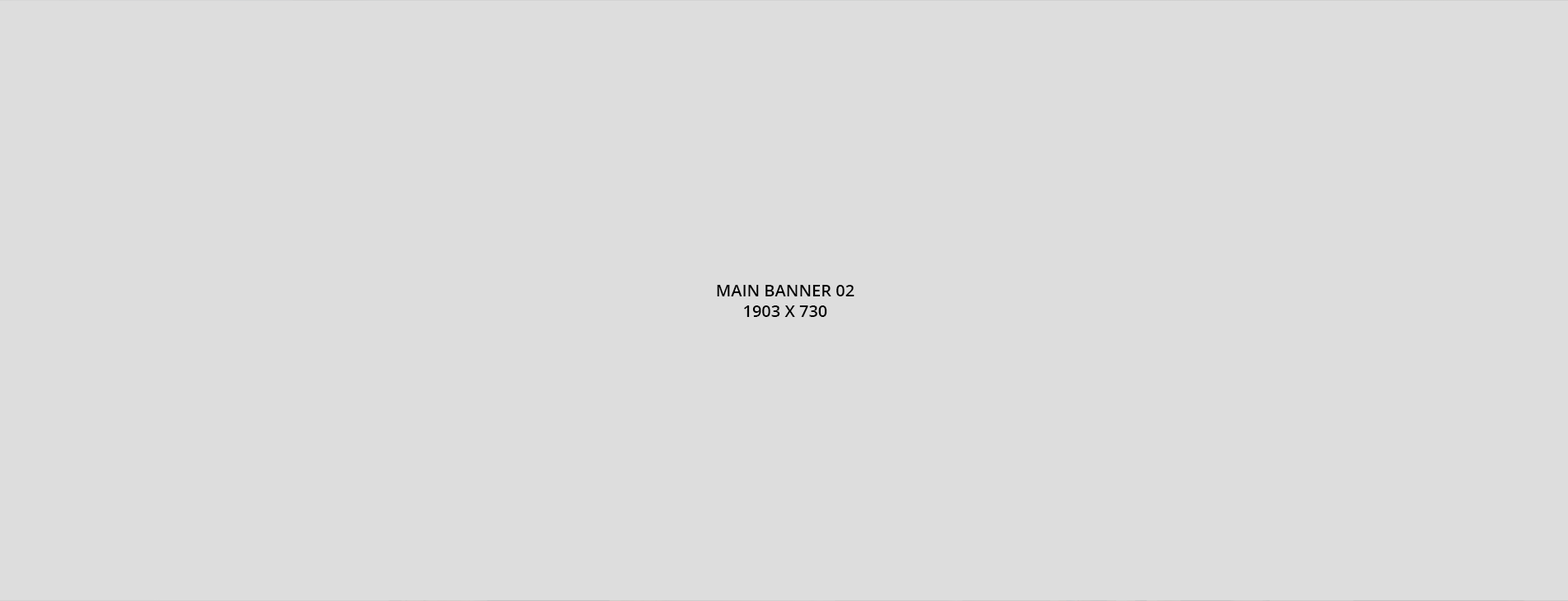
<style>
.page{position:relative;width:1568px;height:601px;background:#dddddd}
.page>*{position:absolute;margin:0}
.t1{font:16.5px/20.6px "OpenSans-SemiBold";color:#000000;text-transform:uppercase}
</style>
<div class="page">
<p class="t1" style="left:717px;top:285px;width:137px;height:32px;text-align:center">main banner 02<br>1903 x 730</p>
</div>
